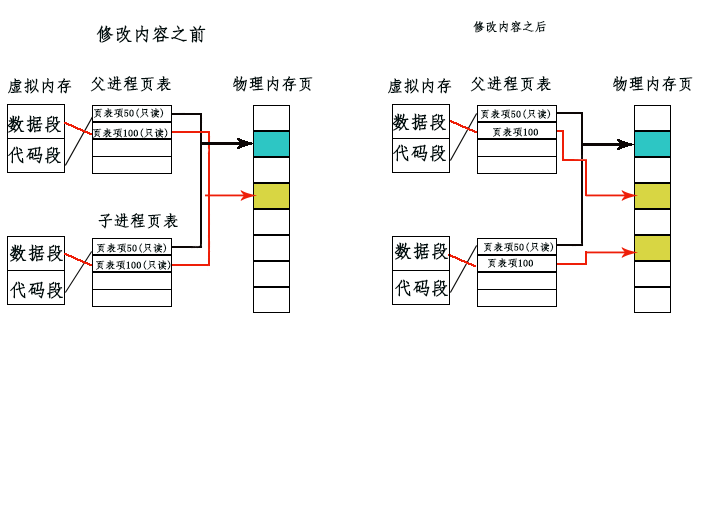
<style>
.page{position:relative;width:709px;height:510px;background:#ffffff}
.page>*{position:absolute;margin:0}
.t1{font:18px "FangSong";color:#010e0e;font-weight:bold}
.t2{font:12px "FangSong";color:#010e0e;font-weight:bold}
.t3{font:16px "FangSong";color:#010e0e;font-weight:bold}
.t4{font:10px "FangSong";color:#010e0e;font-weight:bold}
</style>
<div class="page">
<p class="t1" style="left:96px;top:25px;width:110px;height:18px">修改内容之前</p>
<p class="t2" style="left:473px;top:20px;width:73px;height:13px">修改内容之后</p>
<p class="t3" style="left:8px;top:78px;width:64px;height:16px">虚拟内存</p>
<p class="t3" style="left:90px;top:76px;width:81px;height:16px">父进程页表</p>
<p class="t3" style="left:233px;top:76px;width:80px;height:16px">物理内存页</p>
<p class="t3" style="left:388px;top:78px;width:64px;height:16px">虚拟内存</p>
<p class="t3" style="left:470px;top:76px;width:81px;height:16px">父进程页表</p>
<p class="t3" style="left:613px;top:76px;width:80px;height:16px">物理内存页</p>
<p class="t4" style="left:94px;top:108px;width:70px;height:10px">页表项50(只读)</p>
<p class="t1" style="left:392px;top:113px;width:54px;height:18px">数据段</p>
<p class="t4" style="left:481px;top:109px;width:70px;height:10px">页表项50(只读)</p>
<p class="t1" style="left:7px;top:115px;width:54px;height:18px">数据段</p>
<p class="t4" style="left:93px;top:128px;width:75px;height:10px">页表项100(只读)</p>
<p class="t4" style="left:493px;top:127px;width:45px;height:10px">页表项100</p>
<p class="t1" style="left:8px;top:146px;width:53px;height:18px">代码段</p>
<p class="t1" style="left:393px;top:144px;width:53px;height:18px">代码段</p>
<p class="t3" style="left:98px;top:213px;width:80px;height:16px">子进程页表</p>
<p class="t1" style="left:9px;top:244px;width:54px;height:18px">数据段</p>
<p class="t4" style="left:97px;top:243px;width:70px;height:10px">页表项50(只读)</p>
<p class="t1" style="left:394px;top:242px;width:54px;height:18px">数据段</p>
<p class="t4" style="left:484px;top:242px;width:70px;height:10px">页表项50(只读)</p>
<p class="t4" style="left:96px;top:260px;width:75px;height:10px">页表项100(只读)</p>
<p class="t4" style="left:488px;top:258px;width:45px;height:10px">页表项100</p>
<p class="t1" style="left:10px;top:281px;width:53px;height:18px">代码段</p>
<p class="t1" style="left:395px;top:279px;width:53px;height:18px">代码段</p>
</div>
